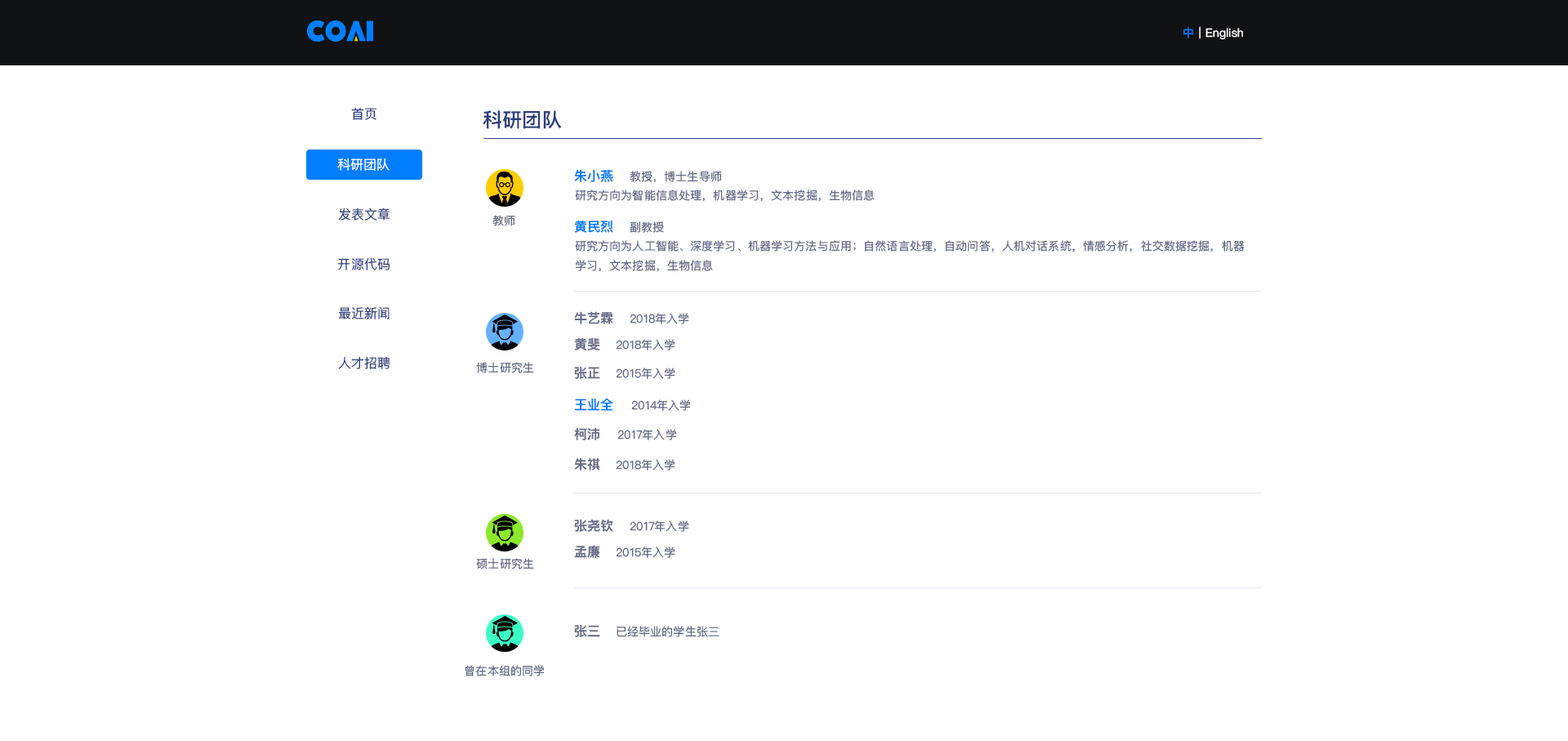
<style>
.page{position:relative;width:1568px;height:741px;background:#ffffff}
.page>*{position:absolute;margin:0}
.t1{font:11.4px "PingFangSC-Regular";letter-spacing:0.01em;color:#007eff}
.t2{font:11.4px "PingFangSC-Regular";letter-spacing:0.01em;color:#ffffff}
.t3{font:13.1px "PingFangSC-Regular";letter-spacing:0.01em;color:#2c3e81}
.t4{font:19.6px "PingFangSC-Semibold";letter-spacing:0.01em;color:#2c3e81}
.t5{font:13.1px "PingFangSC-Regular";letter-spacing:0.01em;color:#ffffff}
.t6{font:13.1px "PingFangSC-Semibold";letter-spacing:0.01em;color:#007eff}
.t7{font:11.4px "PingFangSC-Regular";letter-spacing:0.01em;color:#646b88}
.t8{font:11.4px/19.6px "PingFangSC-Regular";letter-spacing:0.01em;color:#646b88}
.t9{font:13.1px "PingFangSC-Semibold";letter-spacing:0.01em;color:#646b88}
</style>
<div class="page">
<p class="t1" style="left:1183px;top:27px;width:10px;height:11px">中</p>
<p class="t2" style="left:1199px;top:26px;width:44px;height:14px">| English</p>
<p class="t3" style="left:351px;top:107px;width:26px;height:13px">首页</p>
<p class="t4" style="left:483px;top:110px;width:79px;height:19px">科研团队</p>
<p class="t5" style="left:337px;top:158px;width:53px;height:13px">科研团队</p>
<p class="t6" style="left:574px;top:169px;width:39px;height:13px">朱小燕</p>
<p class="t7" style="left:630px;top:171px;width:92px;height:12px">教授，博士生导师</p>
<p class="t7" style="left:575px;top:189px;width:300px;height:13px">研究方向为智能信息处理，机器学习，文本挖掘，生物信息</p>
<p class="t3" style="left:338px;top:207px;width:52px;height:13px">发表文章</p>
<p class="t7" style="left:492px;top:215px;width:23px;height:11px">教师</p>
<p class="t6" style="left:574px;top:220px;width:39px;height:13px">黄民烈</p>
<p class="t7" style="left:630px;top:221px;width:34px;height:12px">副教授</p>
<p class="t8" style="left:575px;top:240px;width:670px;height:32px;text-align:right">研究方向为人工智能、深度学习、机器学习方法与应用；自然语言处理，自动问答，人机对话系统，情感分析，社交数据挖掘，机器<br>学习，文本挖掘，生物信息</p>
<p class="t3" style="left:337px;top:257px;width:53px;height:13px">开源代码</p>
<p class="t3" style="left:338px;top:306px;width:52px;height:13px">最近新闻</p>
<p class="t9" style="left:574px;top:311px;width:39px;height:13px">牛艺霖</p>
<p class="t7" style="left:630px;top:313px;width:59px;height:11px">2018年入学</p>
<p class="t9" style="left:574px;top:337px;width:26px;height:13px">黄斐</p>
<p class="t7" style="left:616px;top:339px;width:59px;height:11px">2018年入学</p>
<p class="t3" style="left:338px;top:356px;width:52px;height:13px">人才招聘</p>
<p class="t7" style="left:476px;top:362px;width:58px;height:11px">博士研究生</p>
<p class="t9" style="left:574px;top:366px;width:26px;height:13px">张正</p>
<p class="t7" style="left:616px;top:368px;width:59px;height:11px">2015年入学</p>
<p class="t6" style="left:574px;top:398px;width:39px;height:13px">王业全</p>
<p class="t7" style="left:631px;top:399px;width:60px;height:12px">2014年入学</p>
<p class="t9" style="left:574px;top:427px;width:26px;height:13px">柯沛</p>
<p class="t7" style="left:617px;top:429px;width:60px;height:11px">2017年入学</p>
<p class="t9" style="left:574px;top:457px;width:26px;height:13px">朱祺</p>
<p class="t7" style="left:616px;top:459px;width:59px;height:11px">2018年入学</p>
<p class="t9" style="left:574px;top:519px;width:39px;height:13px">张尧钦</p>
<p class="t7" style="left:630px;top:520px;width:59px;height:12px">2017年入学</p>
<p class="t9" style="left:574px;top:545px;width:26px;height:13px">孟廉</p>
<p class="t7" style="left:476px;top:558px;width:58px;height:11px">硕士研究生</p>
<p class="t7" style="left:616px;top:546px;width:59px;height:12px">2015年入学</p>
<p class="t9" style="left:574px;top:624px;width:26px;height:13px">张三</p>
<p class="t7" style="left:617px;top:626px;width:102px;height:11px">已经毕业的学生张三</p>
<p class="t7" style="left:465px;top:665px;width:80px;height:11px">曾在本组的同学</p>
</div>
